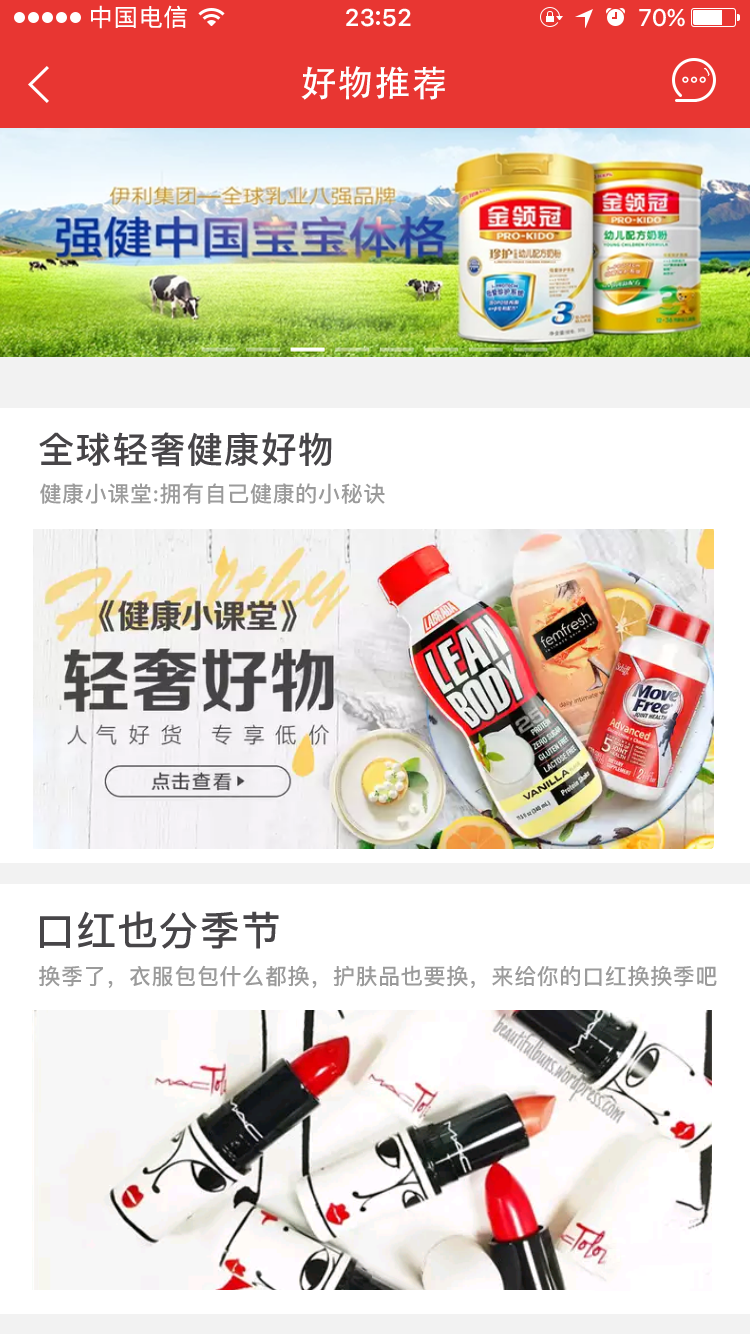
<style>
.page{position:relative;width:750px;height:1334px;background:#ffffff}
.page>*{position:absolute;margin:0}
.t1{font:24px "PingFang-SC-Medium";letter-spacing:0.04em;color:#ffffff}
.t2{font:24px "SFUIText-Semibold";color:#ffffff}
.t3{font:24px "SFUIDisplay-Medium";color:#ffffff}
.t4{font:36px "AdobeHeitiStd-Regular";letter-spacing:0.03em;color:#ffffff}
.t5{font:36px "PingFang-SC-Bold";letter-spacing:0.03em;color:#474548}
.t6{font:22px "PingFang-SC-Bold";letter-spacing:0.03em;color:#9b9b9b}
.t7{font:40px "PingFang-SC-Bold";letter-spacing:0.03em;color:#474548}
</style>
<div class="page">
<p class="t1" style="left:91px;top:5px;width:96px;height:24px">中国电信</p>
<p class="t2" style="left:346px;top:8px;width:65px;height:19px">23 52</p>
<p class="t3" style="left:639px;top:8px;width:46px;height:19px">70%</p>
<p class="t4" style="left:301px;top:66px;width:144px;height:34px">好物推荐</p>
<p class="t5" style="left:39px;top:432px;width:293px;height:35px">全球轻奢健康好物</p>
<p class="t6" style="left:40px;top:483px;width:345px;height:21px">健康小课堂:拥有自己健康的小秘诀</p>
<p class="t7" style="left:40px;top:911px;width:239px;height:38px">口红也分季节</p>
<p class="t6" style="left:39px;top:965px;width:678px;height:24px">换季了，衣服包包什么都换，护肤品也要换，来给你的口红换换季吧</p>
</div>
